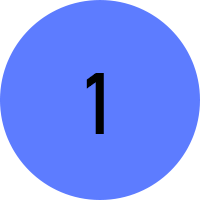
<style>
.page{position:relative;width:200px;height:200px;background:#5d7cff}
.page>*{position:absolute;margin:0}
.t1{font:85px "DINAlternate-Bold";color:#000000}
</style>
<div class="page">
<p class="t1" style="left:86px;top:73px;width:18px;height:61px">1</p>
</div>
